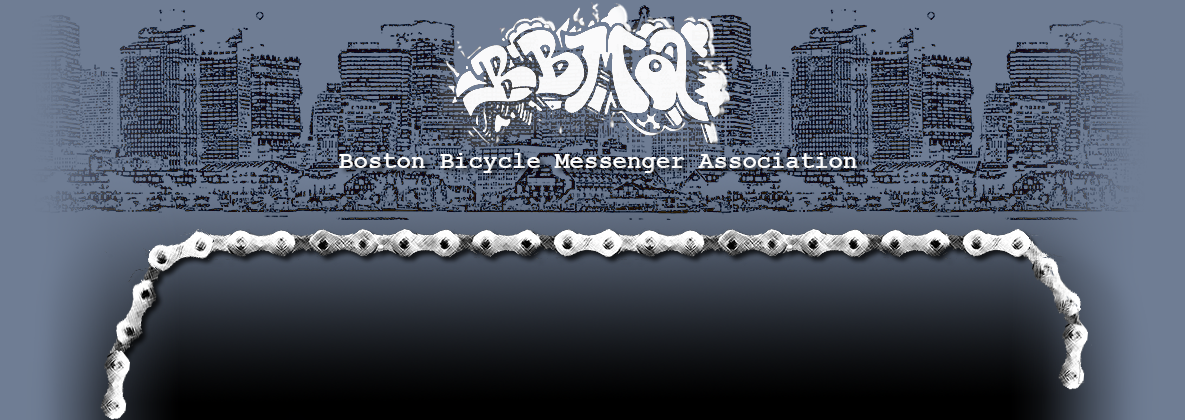
<style>
.page{position:relative;width:1185px;height:420px;background:#6f7d94}
.page>*{position:absolute;margin:0}
.t1{font:24px "CourierNewPS-BoldMT";color:#ffffff}
</style>
<div class="page">
<p class="t1" style="left:339px;top:153px;width:518px;height:20px">Boston Bicycle Messenger Association</p>
</div>
